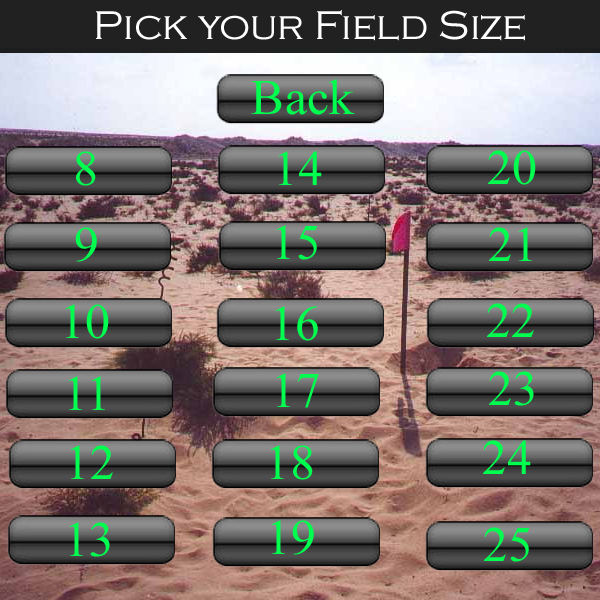
<style>
.page{position:relative;width:600px;height:600px}
.page>*{position:absolute;margin:0}
.t1{font:41.5px "CopperplateGothic-Light";color:#ffffff}
.t2{font:49.8px "TimesNewRomanPSMT";color:#00ff4e}
</style>
<div class="page">
<p class="t1" style="left:96px;top:10px;width:429px;height:31px">Pick your Field Size</p>
<p class="t2" style="left:251px;top:79px;width:104px;height:36px">Back</p>
<p class="t2" style="left:488px;top:150px;width:48px;height:35px">20</p>
<p class="t2" style="left:76px;top:151px;width:20px;height:35px">8</p>
<p class="t2" style="left:278px;top:151px;width:44px;height:34px">14</p>
<p class="t2" style="left:75px;top:227px;width:22px;height:35px">9</p>
<p class="t2" style="left:276px;top:225px;width:42px;height:35px">15</p>
<p class="t2" style="left:489px;top:227px;width:43px;height:34px">21</p>
<p class="t2" style="left:65px;top:304px;width:44px;height:35px">10</p>
<p class="t2" style="left:487px;top:303px;width:47px;height:34px">22</p>
<p class="t2" style="left:275px;top:306px;width:43px;height:35px">16</p>
<p class="t2" style="left:68px;top:376px;width:37px;height:34px">11</p>
<p class="t2" style="left:276px;top:373px;width:43px;height:35px">17</p>
<p class="t2" style="left:489px;top:371px;width:45px;height:35px">23</p>
<p class="t2" style="left:70px;top:445px;width:43px;height:34px">12</p>
<p class="t2" style="left:270px;top:445px;width:43px;height:35px">18</p>
<p class="t2" style="left:483px;top:440px;width:48px;height:34px">24</p>
<p class="t2" style="left:271px;top:520px;width:43px;height:35px">19</p>
<p class="t2" style="left:69px;top:522px;width:41px;height:35px">13</p>
<p class="t2" style="left:484px;top:527px;width:46px;height:35px">25</p>
</div>
